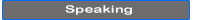
<style>
.page{position:relative;width:224px;height:20px;background:#6e6c6c}
.page>*{position:absolute;margin:0}
.t1{font:10.2px "ArialRoundedMTBold";color:#fcfcfc;scale:1.47 1}
</style>
<div class="page">
<p class="t1" style="left:65px;top:5px;width:67px;height:10px">Speaking</p>
</div>
